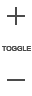
<style>
.page{position:relative;width:32px;height:96px;background:#ffffff}
.page>*{position:absolute;margin:0}
.t1{font:7px "ArialMT";color:#4b4b4b}
</style>
<div class="page">
<p class="t1" style="left:2px;top:46px;width:29px;height:5px">TOGGLE</p>
<p class="t1" style="left:2px;top:46px;width:29px;height:5px">TOGGLE</p>
</div>
